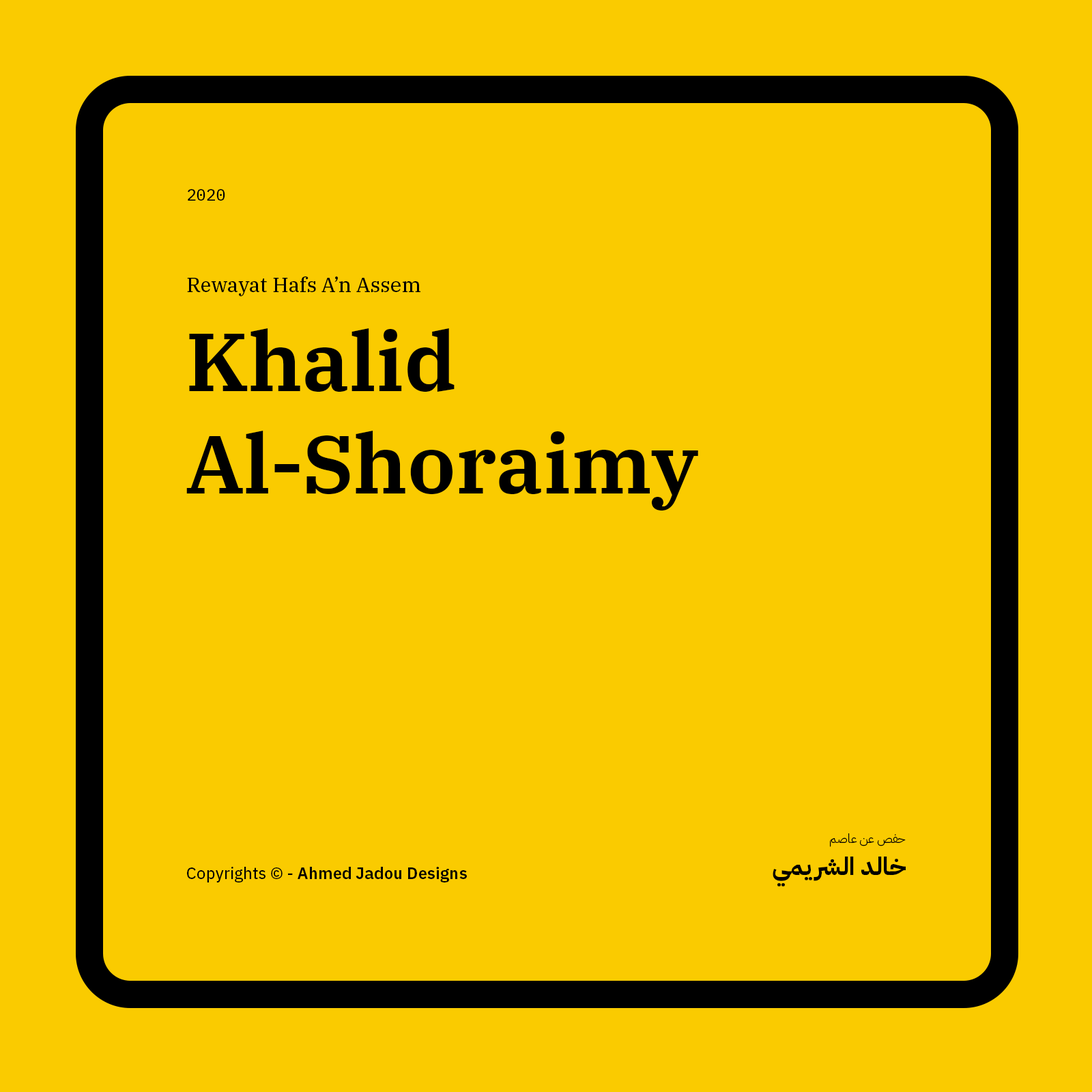
<style>
.page{position:relative;width:1092px;height:1092px;background:#facb00}
.page>*{position:absolute;margin:0}
.t1{font:16.4px "IBMPlexMono-Text";color:#000000}
.t2{font:20.5px "IBMPlexSerif-Text";color:#000000}
.t3{font:81.9px/102.7px "IBMPlexSerif-SemiBold";color:#000000}
.t4{font:12.3px "IBMPlexArabic-Light";color:#000000}
.t5{font:24.6px "IBMPlexArabic-Bold";color:#000000}
.t6{font:16.4px "IBMPlexSans-SemiBold";color:#000000}
.t7{font:16.4px "IBMPlexSans-Text";color:#000000}
</style>
<div class="page">
<p class="t1" style="left:188px;top:189px;width:37px;height:12px">2020</p>
<p class="t2" style="left:187px;top:276px;width:233px;height:20px">Rewayat Hafs A’n Assem</p>
<p class="t3" style="left:186px;top:328px;width:512px;height:183px">Khalid Al-Shoraimy</p>
<p class="t4" style="left:830px;top:833px;width:76px;height:14px">حفص عن عاصم</p>
<p class="t5" style="left:773px;top:857px;width:133px;height:30px">خالد الشريمي</p>
<p class="t6" style="left:187px;top:867px;width:280px;height:15px"><span class="t7">Copyrights © - </span>Ahmed Jadou Designs</p>
</div>
